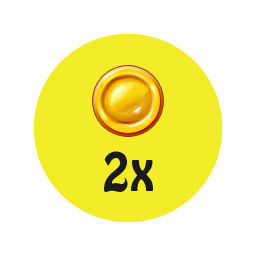
<style>
.page{position:relative;width:256px;height:256px;background:#ffffff}
.page>*{position:absolute;margin:0}
.t1{font:48px "HoboStd";color:#1b1b1b}
</style>
<div class="page">
<p class="t1" style="left:104px;top:151px;width:49px;height:41px">2x</p>
</div>
